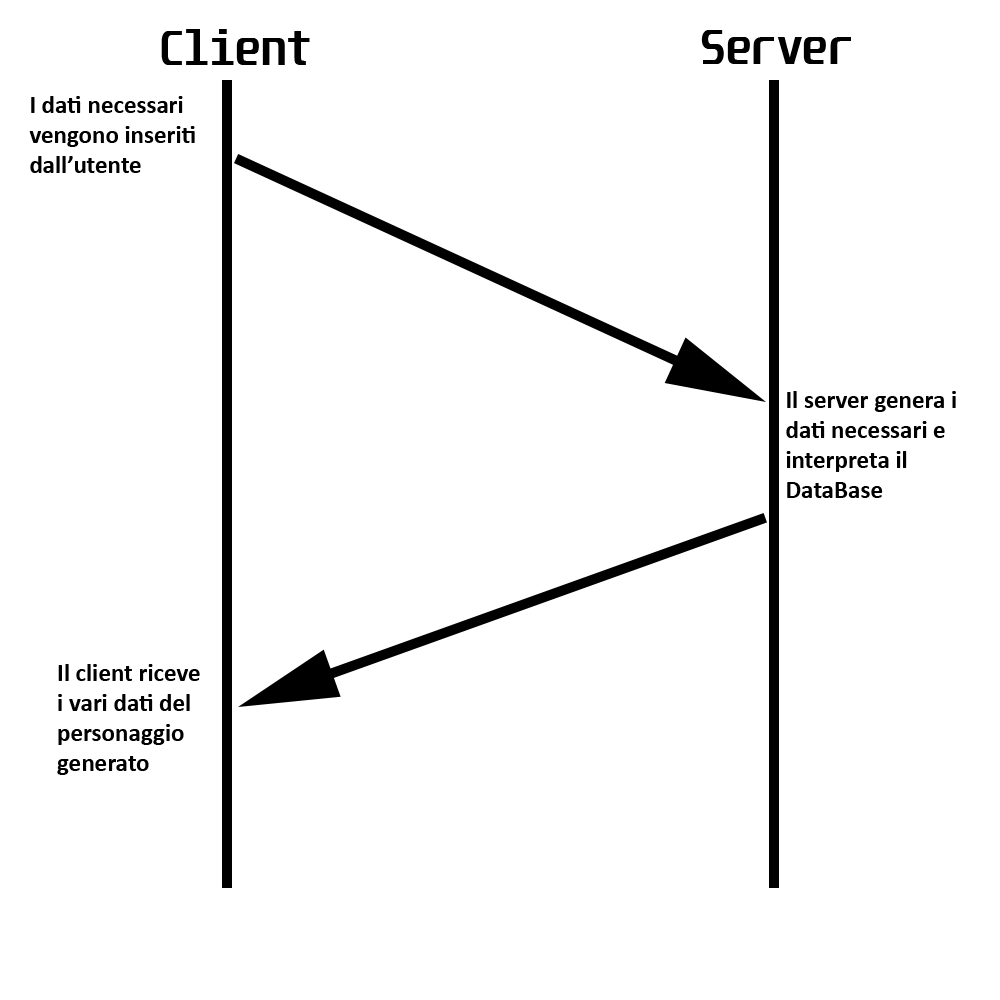
<style>
.page{position:relative;width:1000px;height:1000px;background:#ffffff}
.page>*{position:absolute;margin:0}
.t1{font:41.7px "Unispace-Bold";color:#000000}
.t2{font:25px "Calibri-Bold";color:#000000}
</style>
<div class="page">
<p class="t1" style="left:161px;top:29px;width:149px;height:36px">Client</p>
<p class="t1" style="left:701px;top:30px;width:150px;height:34px">Server</p>
<p class="t2" style="left:29px;top:96px;width:166px;height:77px">I dati necessari<br>vengono inseriti<br>dall’utente</p>
<p class="t2" style="left:786px;top:391px;width:170px;height:107px">Il server genera i<br>dati necessari e <br>interpreta il<br>DataBase</p>
<p class="t2" style="left:57px;top:664px;width:143px;height:111px">Il client riceve<br>i vari dati del<br>personaggio<br>generato</p>
</div>
